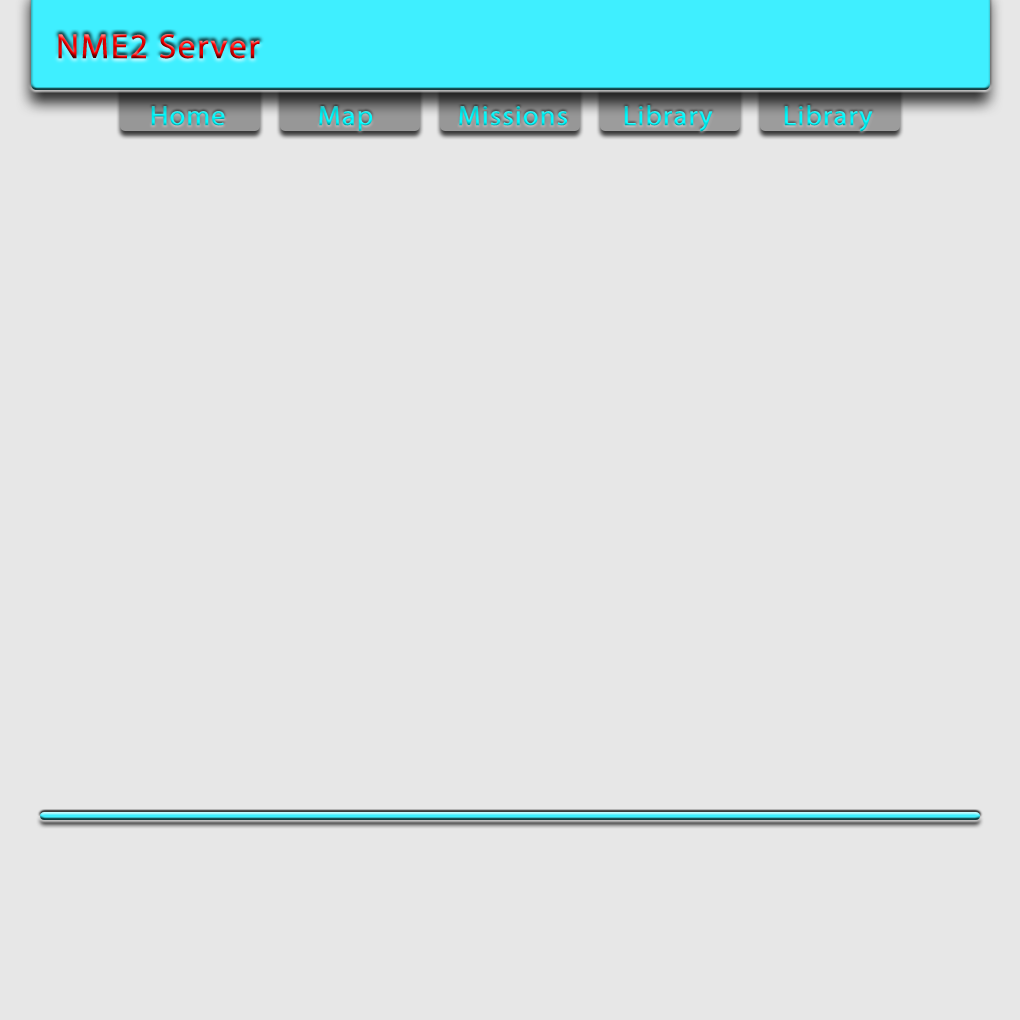
<style>
.page{position:relative;width:1020px;height:1020px;background:#e7e7e7}
.page>*{position:absolute;margin:0}
.t1{font:60px "MyriadPro-Regular";letter-spacing:0.025em;font-weight:bold}
.t2{font:48px "MyriadPro-Regular";letter-spacing:0.025em;font-weight:bold}
</style>
<div class="page">
<p class="t1" style="left:58px;top:34px;width:202px;height:25px">NME2 Server</p>
<p class="t2" style="left:151px;top:106px;width:74px;height:20px">Home</p>
<p class="t2" style="left:319px;top:106px;width:53px;height:25px">Map</p>
<p class="t2" style="left:459px;top:106px;width:108px;height:20px">Missions</p>
<p class="t2" style="left:624px;top:105px;width:89px;height:27px">Library</p>
<p class="t2" style="left:784px;top:105px;width:89px;height:27px">Library</p>
</div>
